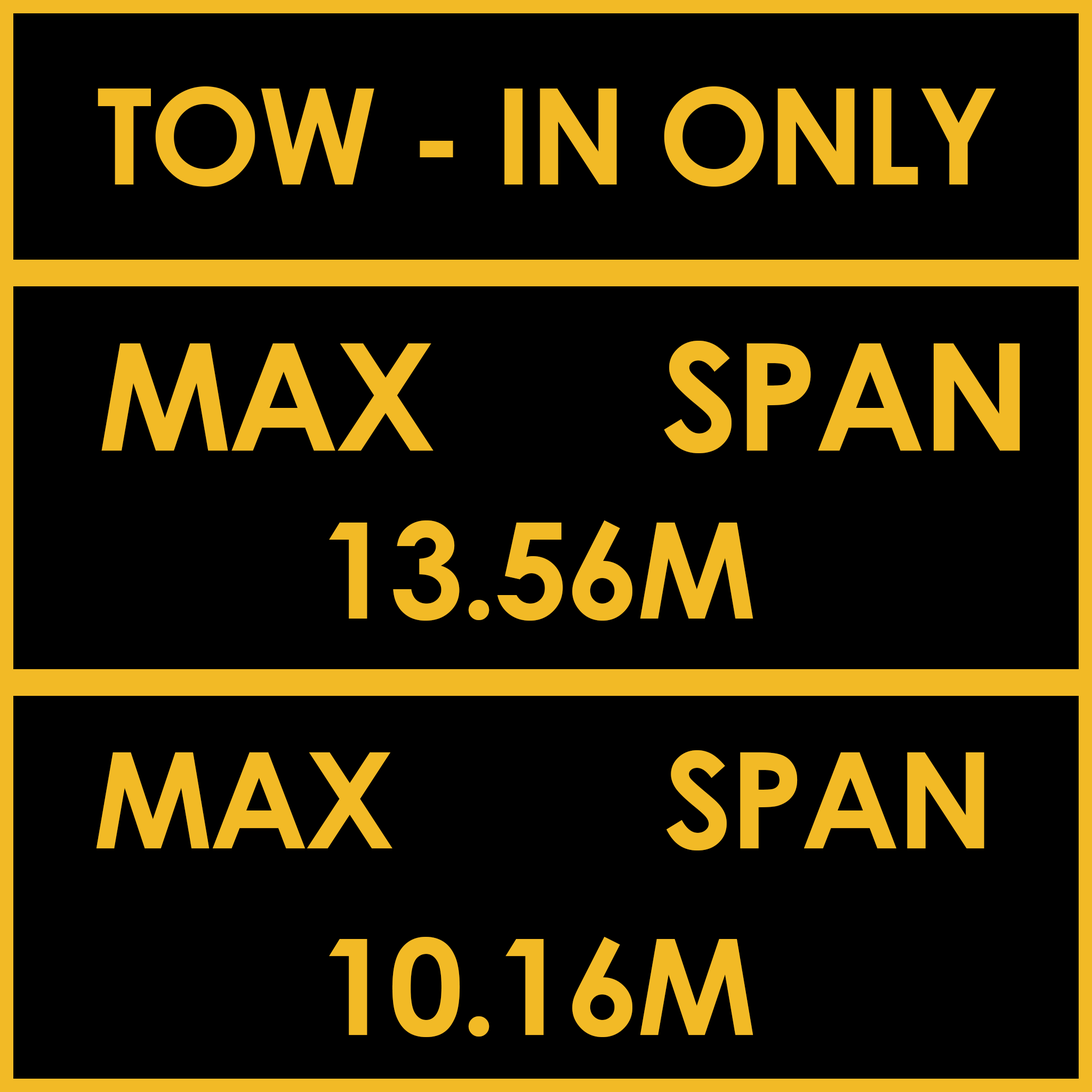
<style>
.page{position:relative;width:1092px;height:1092px;background:#000000}
.page>*{position:absolute;margin:0}
.t1{font:149.3px "CenturyGothic-Bold";letter-spacing:-0.025em;color:#f2ba26}
.t2{font:133.3px "CenturyGothic-Bold";letter-spacing:-0.025em;color:#f2ba26}
</style>
<div class="page">
<p class="t1" style="left:101px;top:341px;width:919px;height:112px">MAX      SPAN</p>
<p class="t2" style="left:329px;top:520px;width:424px;height:101px">13.56M</p>
<p class="t2" style="left:96px;top:750px;width:888px;height:100px">MAX        SPAN</p>
<p class="t2" style="left:329px;top:937px;width:424px;height:100px">10.16M</p>
</div>
